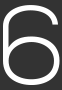
<style>
.page{position:relative;width:62px;height:90px;background:#333333}
.page>*{position:absolute;margin:0}
.t1{font:111.8px "NexaLight";color:#ffffff;scale:0.92 1}
</style>
<div class="page">
<p class="t1" style="left:3px;top:5px;width:57px;height:80px">6</p>
</div>
